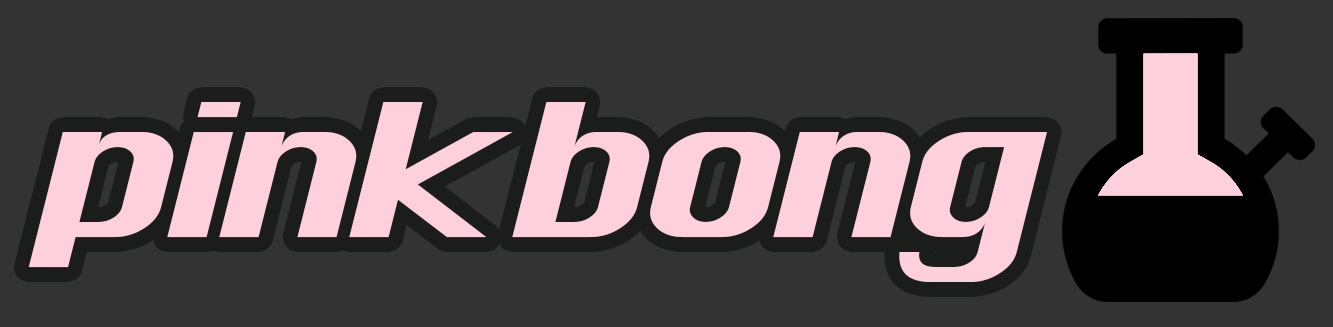
<style>
.page{position:relative;width:1333px;height:327px;background:#333333}
.page>*{position:absolute;margin:0}
.t1{font:180px "Silom";letter-spacing:-0.11em;color:#fdd0dc;font-style:italic;scale:1.3 1}
</style>
<div class="page">
<p class="t1" style="left:28px;top:102px;width:1019px;height:180px">pink bong</p>
</div>
